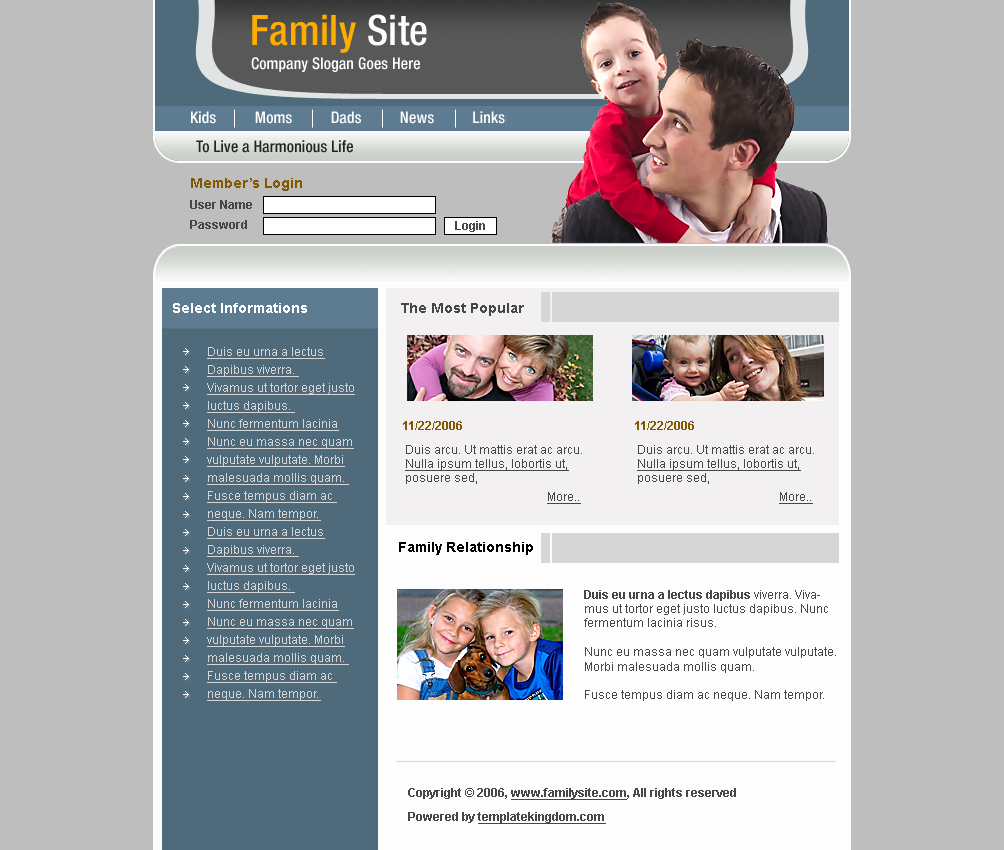
<style>
.page{position:relative;width:1004px;height:850px;background:#bebebe}
.page>*{position:absolute;margin:0}
.t1{font:42px "HelveticaNeue-MediumCond";color:#ffae00}
.t2{font:42px "HelveticaNeue-MediumCond";color:#fdfdfd}
.t3{font:16px "HelveticaNeue-MediumCond";color:#ffffff}
.t4{font:16px "HelveticaNeue-MediumCond";color:#242424}
.t5{font:14px "Arial-BoldMT";color:#825900}
.t6{font:12px/20px "Arial-BoldMT";color:#474747}
.t7{font:12px "Arial-BoldMT";color:#474747}
.t8{font:14px "Arial-BoldMT";color:#ffffff}
.t9{font:14px "Arial-BoldMT";color:#474747}
.t10{font:12px/18px "ArialMT";color:#d6d6d6;text-decoration:underline}
.t11{font:12px "Arial-BoldMT";color:#825900}
.t12{font:12px "ArialMT";color:#474747}
.t13{font:12px "ArialMT";color:#474747;text-decoration:underline}
.t14{font:14px "Arial-BoldMT";color:#000000}
.t15{font:12px "Arial-BoldMT";color:#474747;text-decoration:underline}
</style>
<div class="page">
<p class="t1" style="left:252px;top:14px;width:175px;height:39px">Family <span class="t2">Site</span></p>
<p class="t3" style="left:251px;top:57px;width:169px;height:15px">Company Slogan Goes Here</p>
<p class="t3" style="left:191px;top:111px;width:314px;height:13px">Kids          Moms          Dads          News          Links</p>
<p class="t4" style="left:196px;top:140px;width:157px;height:13px">To Live a Harmonious Life</p>
<p class="t5" style="left:191px;top:178px;width:111px;height:13px">Member’s Login</p>
<p class="t6" style="left:190px;top:200px;width:62px;height:29px">User Name<br>Password</p>
<p class="t7" style="left:455px;top:221px;width:30px;height:11px">Login</p>
<p class="t8" style="left:173px;top:303px;width:134px;height:10px">Select Informations</p>
<p class="t9" style="left:401px;top:303px;width:123px;height:13px">The Most Popular</p>
<p class="t10" style="left:207px;top:347px;width:148px;height:354px">Duis eu urna a lectus<br>Dapibus viverra. <br>Vivamus ut tortor eget justo luctus dapibus. <br>Nunc fermentum lacinia<br>Nunc eu massa nec quam vulputate vulputate. Morbi malesuada mollis quam. <br>Fusce tempus diam ac <br>neque. Nam tempor.<br>Duis eu urna a lectus<br>Dapibus viverra. <br>Vivamus ut tortor eget justo luctus dapibus. <br>Nunc fermentum lacinia<br>Nunc eu massa nec quam vulputate vulputate. Morbi malesuada mollis quam. <br>Fusce tempus diam ac <br>neque. Nam tempor.</p>
<p class="t11" style="left:403px;top:421px;width:59px;height:9px">11/22/2006</p>
<p class="t11" style="left:635px;top:421px;width:59px;height:9px">11/22/2006</p>
<p class="t12" style="left:405px;top:445px;width:177px;height:39px">Duis arcu. Ut mattis erat ac arcu. <span class="t13">Nulla ipsum tellus, lobortis ut, </span>posuere sed,</p>
<p class="t12" style="left:637px;top:445px;width:177px;height:39px">Duis arcu. Ut mattis erat ac arcu. <span class="t13">Nulla ipsum tellus, lobortis ut, </span>posuere sed,</p>
<p class="t13" style="left:547px;top:492px;width:34px;height:12px">More..</p>
<p class="t13" style="left:779px;top:492px;width:34px;height:12px">More..</p>
<p class="t14" style="left:399px;top:542px;width:134px;height:13px">Family Relationship</p>
<p class="t12" style="left:584px;top:590px;width:252px;height:111px"><span class="t7">Duis eu urna a lectus dapibus</span> viverra. Vivamus ut tortor eget justo luctus dapibus. Nunc fermentum lacinia risus. <br><br>Nunc eu massa nec quam vulputate vulputate. Morbi malesuada mollis quam. <br><br>Fusce tempus diam ac neque. Nam tempor.</p>
<p class="t7" style="left:408px;top:788px;width:328px;height:12px">Copyright © 2006, <span class="t15">www.familysite.com</span>, All rights reserved</p>
<p class="t15" style="left:408px;top:812px;width:198px;height:12px"><span class="t7">Powered by </span>templatekingdom.com</p>
</div>
